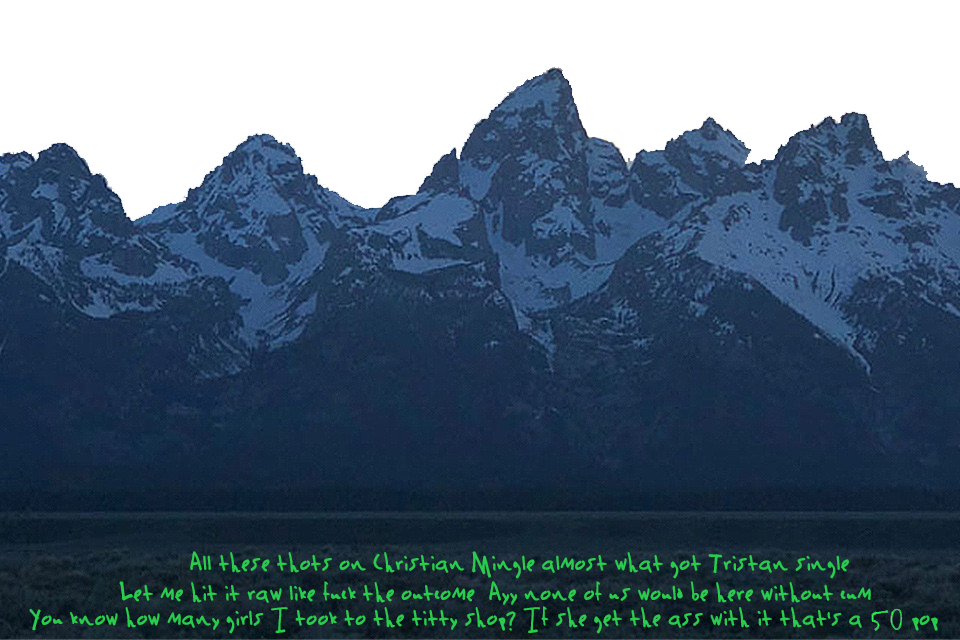
<style>
.page{position:relative;width:960px;height:640px;background:#ffffff}
.page>*{position:absolute;margin:0}
.t1{font:26.7px "YungJakesNewHandwriting-Rg";color:#29cc4c}
</style>
<div class="page">
<p class="t1" style="left:190px;top:551px;width:659px;height:28px">All these thots on Christian Mingle almost what got Tristan single</p>
<p class="t1" style="left:119px;top:581px;width:752px;height:24px">Let me hit it raw like fuck the outcome  Ayy none of us would be here without cum</p>
<p class="t1" style="left:29px;top:606px;width:833px;height:28px">You know how many girls I took to the titty shop? If she get the ass with it that's a</p>
<p class="t1" style="left:912px;top:615px;width:26px;height:16px">pop</p>
</div>
